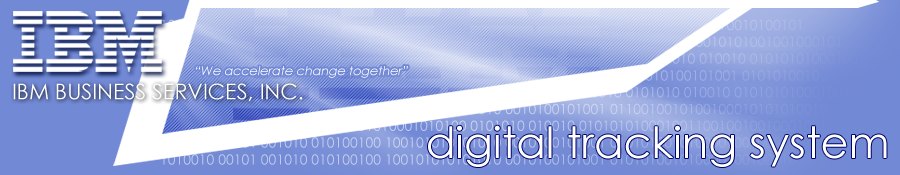
<style>
.page{position:relative;width:900px;height:175px}
.page>*{position:absolute;margin:0}
.t1{font:12.6px "CenturyGothic";color:#ffffff;font-style:italic}
.t2{font:21.6px "CenturyGothic";color:#ffffff}
.t3{font:43.2px "CenturyGothic";color:#ffffff}
</style>
<div class="page">
<p class="t1" style="left:196px;top:66px;width:212px;height:12px">“We accelerate change together”</p>
<p class="t2" style="left:13px;top:83px;width:290px;height:19px">IBM BUSINESS SERVICES, INC.</p>
<p class="t3" style="left:428px;top:125px;width:459px;height:42px">digital tracking system</p>
</div>
